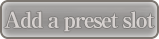
<style>
.page{position:relative;width:159px;height:39px}
.page>*{position:absolute;margin:0}
.t1{font:22px "RyuminPro-ExBold";letter-spacing:-0.08em;color:#d6d1cf}
</style>
<div class="page">
<p class="t1" style="left:4px;top:11px;width:151px;height:21px">Add a preset slot</p>
</div>
